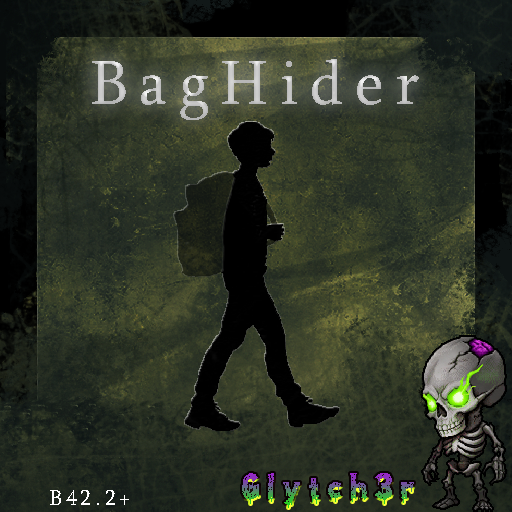
<style>
.page{position:relative;width:512px;height:512px}
.page>*{position:absolute;margin:0}
.t1{font:64.1px "Sylfaen";letter-spacing:0.18em;color:#c4c4c4}
.t2{font:22px "Sylfaen";letter-spacing:0.18em;color:#ffffff}
</style>
<div class="page">
<p class="t1" style="left:92px;top:59px;width:327px;height:61px">BagHider</p>
<p class="t2" style="left:50px;top:490px;width:79px;height:15px">B42.2+</p>
</div>
